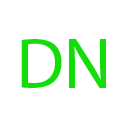
<style>
.page{position:relative;width:128px;height:128px;background:#ffffff}
.page>*{position:absolute;margin:0}
.t1{font:72px "MyriadPro-Regular";color:#14de0a}
</style>
<div class="page">
<p class="t1" style="left:21px;top:39px;width:85px;height:49px">DN</p>
</div>
